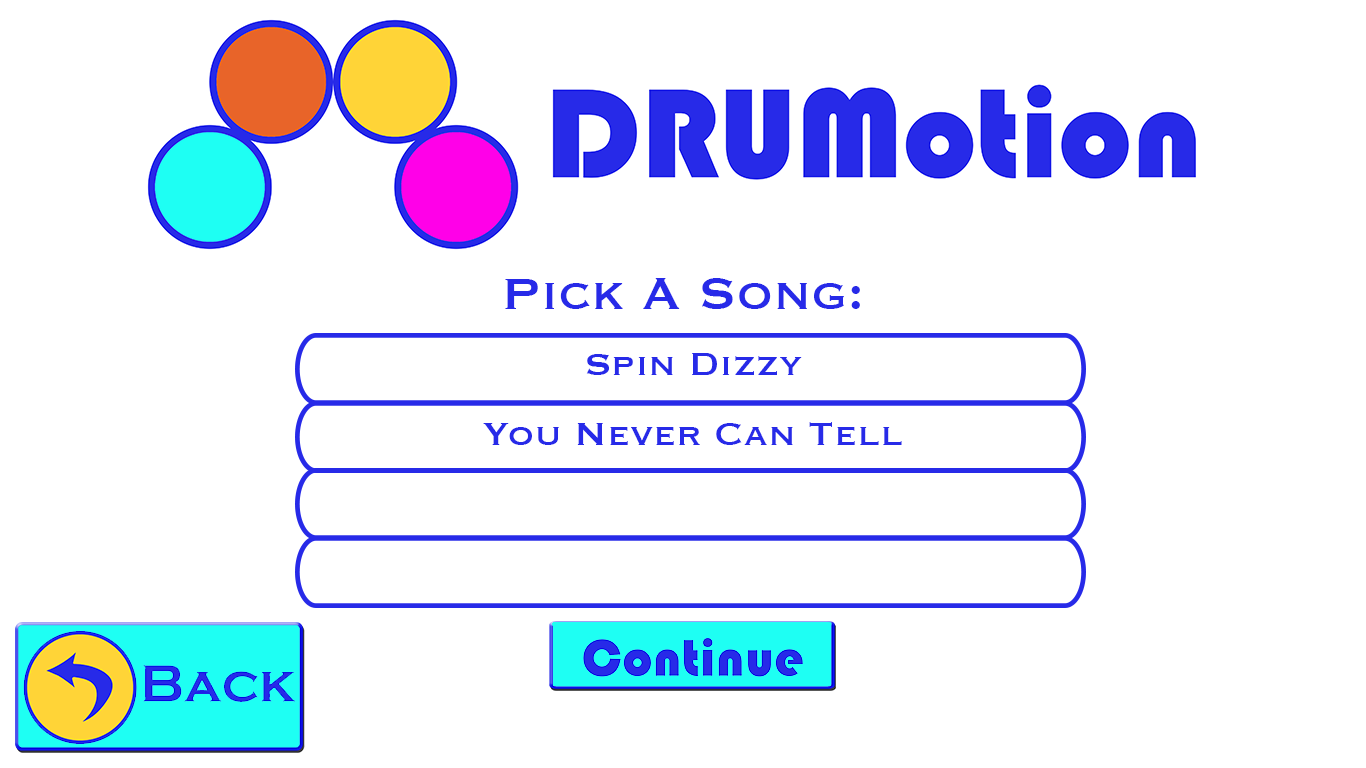
<style>
.page{position:relative;width:1366px;height:768px;background:#ffffff}
.page>*{position:absolute;margin:0}
.t1{font:58.3px "Copperplate";color:#272ae8}
.t2{font:41.7px "Copperplate";color:#272ae8}
</style>
<div class="page">
<p class="t1" style="left:505px;top:278px;width:355px;height:31px">Pick A Song:</p>
<p class="t2" style="left:586px;top:353px;width:216px;height:22px">Spin Dizzy</p>
<p class="t2" style="left:483px;top:422px;width:419px;height:23px">You Never Can Tell</p>
</div>
